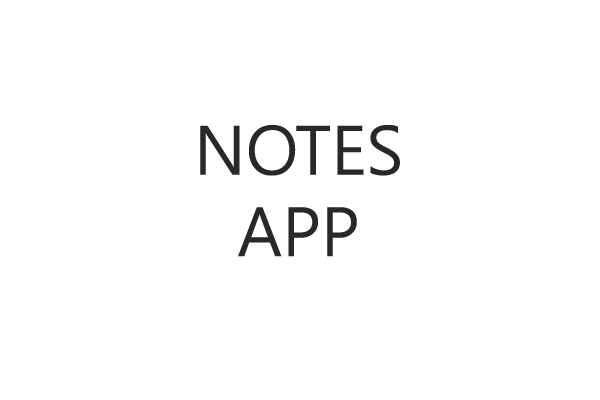
<style>
.page{position:relative;width:600px;height:400px;background:#ffffff}
.page>*{position:absolute;margin:0}
.t1{font:67.9px "MalgunGothic";color:#282828}
</style>
<div class="page">
<p class="t1" style="left:200px;top:125px;width:200px;height:132px;text-align:center">NOTES<br>APP</p>
</div>
